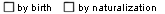
<style>
.page{position:relative;width:165px;height:14px;background:#ffffff}
.page>*{position:absolute;margin:0}
.t1{font:10px "ArialMT";color:#000000}
</style>
<div class="page">
<p class="t1" style="left:18px;top:4px;width:33px;height:9px">by birth</p>
<p class="t1" style="left:79px;top:4px;width:77px;height:9px">by naturalization</p>
</div>
